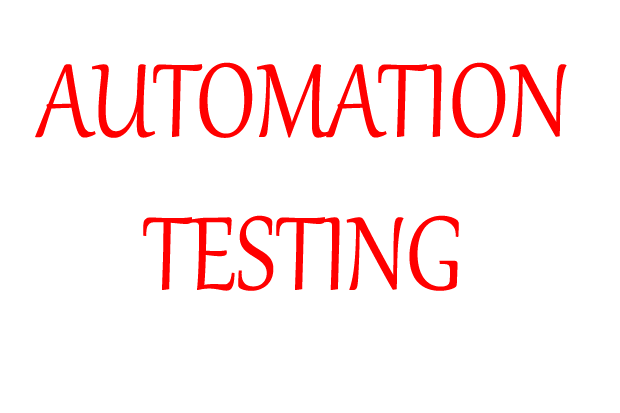
<style>
.page{position:relative;width:620px;height:413px;background:#ffffff}
.page>*{position:absolute;margin:0}
.t1{font:127.6px "Gabriola";color:#ff0000;scale:0.88 1}
</style>
<div class="page">
<p class="t1" style="left:35px;top:62px;width:532px;height:229px;text-align:center">AUTOMATION<br>TESTING</p>
</div>
